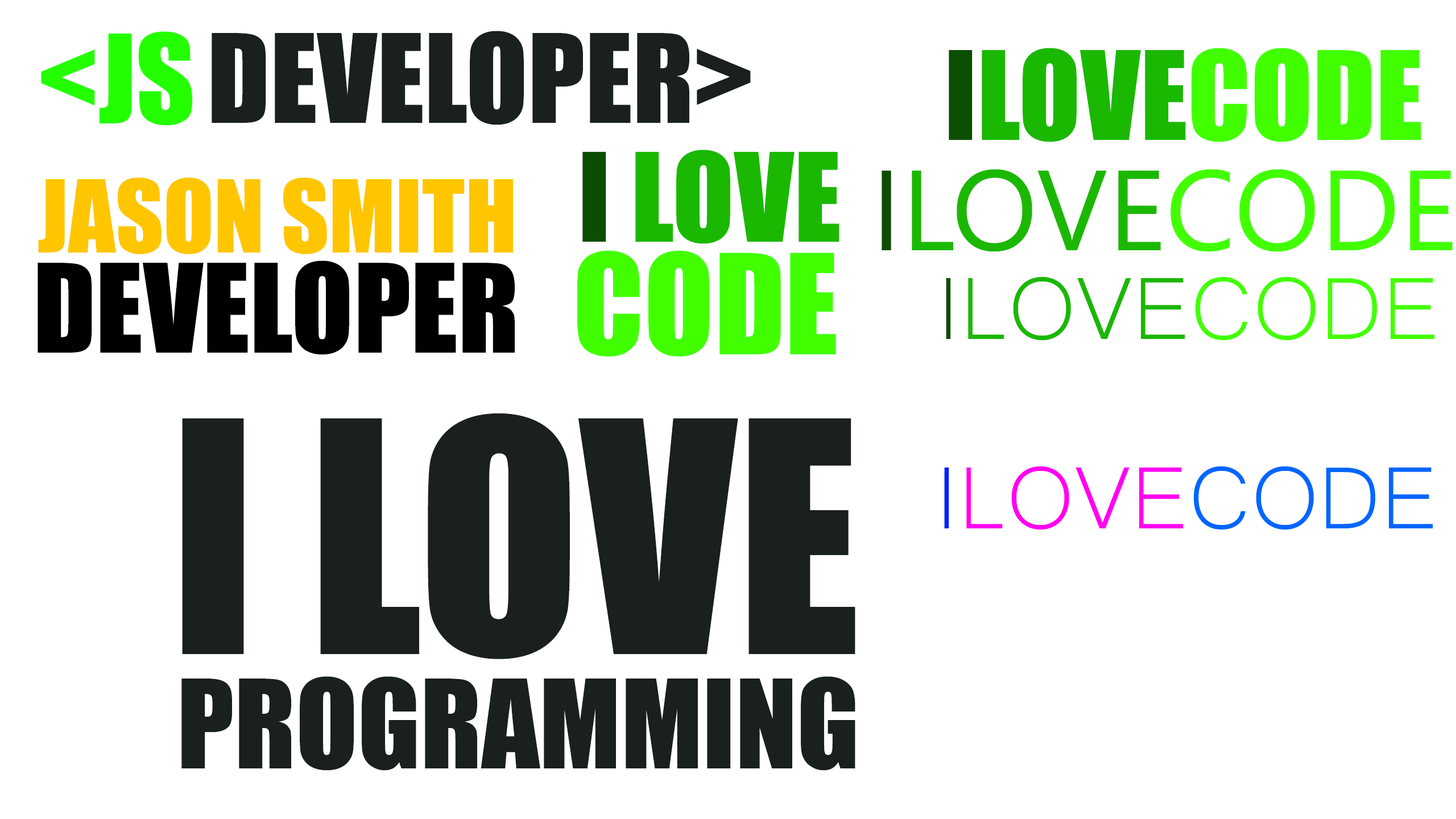
<style>
.page{position:relative;width:1456px;height:819px;background:#ffffff}
.page>*{position:absolute;margin:0}
.t1{font:113.7px "Impact";color:#24ff00;text-transform:uppercase}
.t2{font:113.7px "Impact";color:#1a1f1f;text-transform:uppercase}
.t3{font:113.7px "Impact";color:#1bb801;text-transform:uppercase}
.t4{font:113.7px "Impact";color:#0c4e01;text-transform:uppercase}
.t5{font:113.7px "Impact";color:#42ff00;text-transform:uppercase}
.t6{font:113.7px "NirmalaUI";color:#1bb801;text-transform:uppercase}
.t7{font:113.7px "NirmalaUI";color:#0c4e01;text-transform:uppercase}
.t8{font:113.7px "NirmalaUI";color:#42ff00;text-transform:uppercase}
.t9{font:92.9px "Impact";color:#ffc600;text-transform:uppercase}
.t10{font:128.4px "Impact";color:#42ff00;text-transform:uppercase}
.t11{font:113.7px "Impact";color:#000000;text-transform:uppercase}
.t12{font:113.7px "Microsoft-Yi-Baiti";color:#1bb801;text-transform:uppercase}
.t13{font:113.7px "Microsoft-Yi-Baiti";color:#0c4e01;text-transform:uppercase}
.t14{font:113.7px "Microsoft-Yi-Baiti";color:#42ff00;text-transform:uppercase}
.t15{font:298.1px "Impact";color:#1a1f1f;text-transform:uppercase}
.t16{font:113.7px "Microsoft-Yi-Baiti";color:#ff00f0;text-transform:uppercase}
.t17{font:113.7px "Microsoft-Yi-Baiti";color:#001eff;text-transform:uppercase}
.t18{font:113.7px "Microsoft-Yi-Baiti";color:#0066ff;text-transform:uppercase}
</style>
<div class="page">
<p class="t1" style="left:41px;top:31px;width:151px;height:95px">&lt;JS</p>
<p class="t2" style="left:212px;top:31px;width:539px;height:94px">DEveloper&gt;</p>
<p class="t3" style="left:949px;top:48px;width:472px;height:94px"><span class="t4">I</span>Love<span class="t5">Code</span></p>
<p class="t3" style="left:582px;top:150px;width:257px;height:94px"><span class="t4">I </span>Love</p>
<p class="t6" style="left:882px;top:169px;width:571px;height:83px"><span class="t7">I</span>Love<span class="t8">Code</span></p>
<p class="t9" style="left:38px;top:177px;width:475px;height:77px">Jason SMith</p>
<p class="t10" style="left:577px;top:250px;width:259px;height:107px">Code</p>
<p class="t11" style="left:38px;top:260px;width:477px;height:95px">Developer</p>
<p class="t12" style="left:946px;top:277px;width:489px;height:63px"><span class="t13">I</span>Love<span class="t14">Code</span></p>
<p class="t15" style="left:182px;top:413px;width:673px;height:246px">I love</p>
<p class="t16" style="left:944px;top:466px;width:489px;height:63px"><span class="t17">I</span>Love<span class="t18">Code</span></p>
<p class="t2" style="left:181px;top:676px;width:674px;height:95px">Programming</p>
</div>
